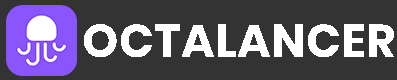
<style>
.page{position:relative;width:397px;height:80px;background:#333333}
.page>*{position:absolute;margin:0}
.t1{font:46.4px "Poppins-Bold";color:#ffffff;text-transform:uppercase}
</style>
<div class="page">
<p class="t1" style="left:84px;top:24px;width:310px;height:33px">Octalancer</p>
</div>
